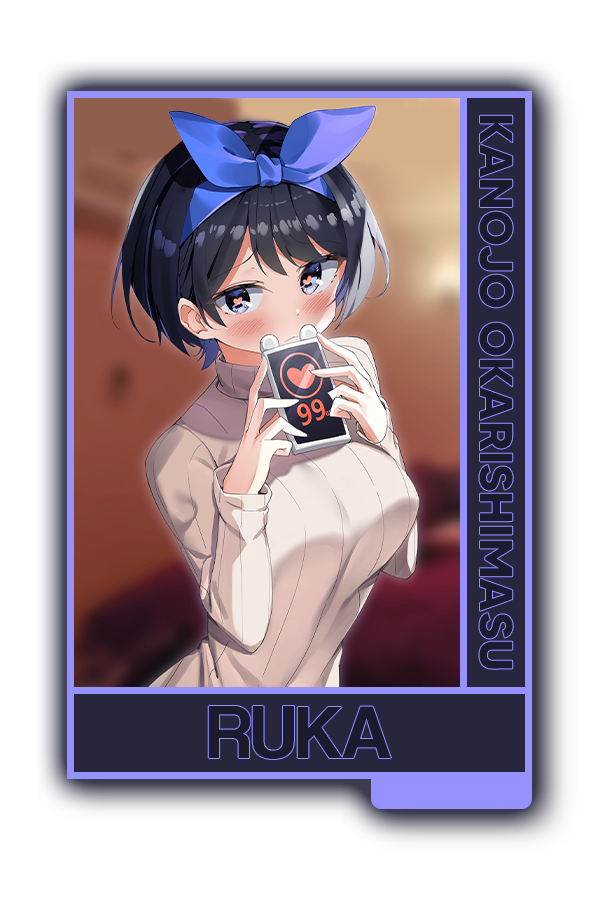
<style>
.page{position:relative;width:600px;height:900px;background:#ffffff}
.page>*{position:absolute;margin:0}
.t1{font:45.9px "MADETOMMY-Bold";color:#202026}
.t2{font:76.6px "CoolveticaRg-Regular";color:#202026}
</style>
<div class="page">
<p class="t1" style="left:479px;top:115px;width:34px;height:554px;rotate:90deg">KANOJO OKARISHIMASU</p>
<p class="t2" style="left:208px;top:706px;width:183px;height:53px">RUKA</p>
</div>
